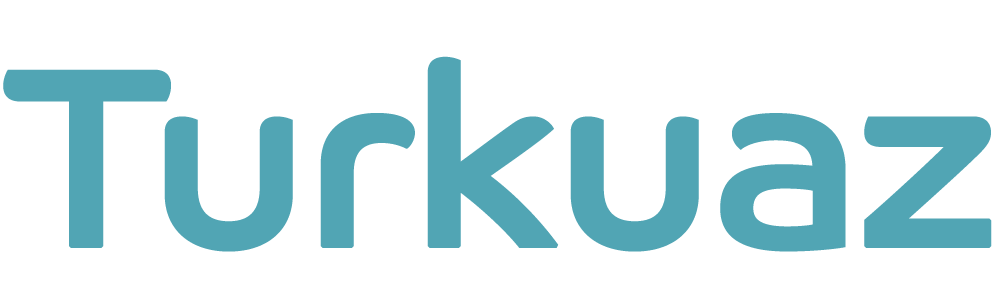
<style>
.page{position:relative;width:1000px;height:308px;background:#ffffff}
.page>*{position:absolute;margin:0}
.t1{font:253.9px "CoHeadline";letter-spacing:-0.02em;color:#51a5b4;font-weight:bold}
</style>
<div class="page">
<p class="t1" style="left:3px;top:56px;width:989px;height:196px">Turkuaz</p>
</div>
